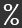
<style>
.page{position:relative;width:22px;height:28px;background:#333333}
.page>*{position:absolute;margin:0}
.t1{font:33.3px "Candara";color:#feffff}
</style>
<div class="page">
<p class="t1" style="left:3px;top:4px;width:16px;height:21px">%</p>
</div>
